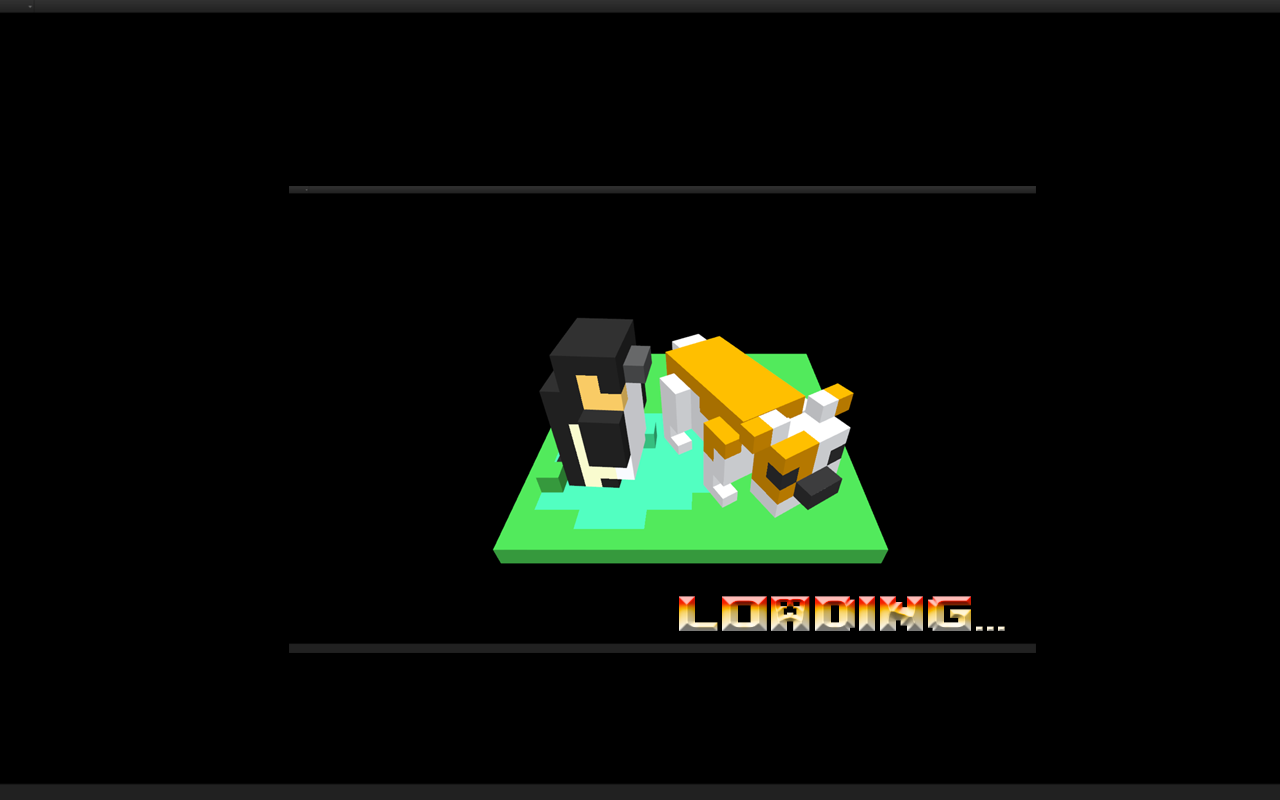
<style>
.page{position:relative;width:1280px;height:800px;background:#000000}
.page>*{position:absolute;margin:0}
.t1{font:34.5px "MineCrafter-3";scale:1.48 1}
</style>
<div class="page">
<p class="t1" style="left:679px;top:596px;width:326px;height:35px">LOADING...</p>
</div>
